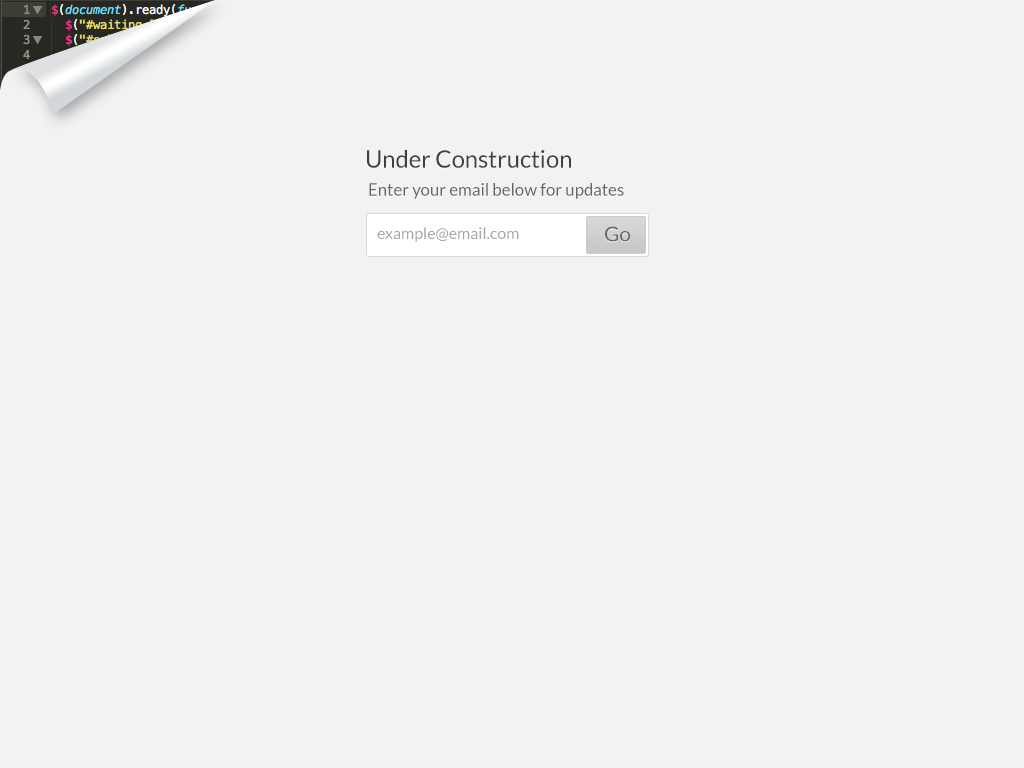
<style>
.page{position:relative;width:1024px;height:768px;background:#f2f2f2}
.page>*{position:absolute;margin:0}
.t1{font:24px "Lato-Regular";color:#3f3f3f}
.t2{font:17px "Lato-Regular";color:#646464}
.t3{font:16px "Lato-Regular";color:#a6a6a6}
.t4{font:20.2px "Lato-Regular";color:#676767;scale:1.04 1}
</style>
<div class="page">
<p class="t1" style="left:367px;top:150px;width:204px;height:18px">Under Construction</p>
<p class="t2" style="left:369px;top:183px;width:255px;height:16px">Enter your email below for updates</p>
<p class="t3" style="left:377px;top:227px;width:142px;height:15px">example@email.com</p>
<p class="t4" style="left:605px;top:226px;width:26px;height:16px">Go</p>
</div>
